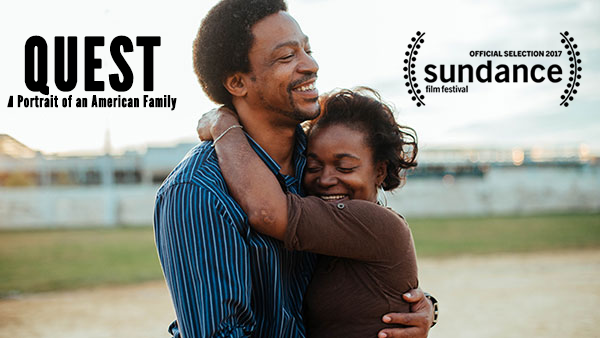
<style>
.page{position:relative;width:600px;height:338px}
.page>*{position:absolute;margin:0}
.t1{font:72px "LeagueGothic";letter-spacing:0.025em;color:#000000;font-weight:bold}
.t2{font:16px "LeagueGothic";letter-spacing:0.025em;color:#000000;font-weight:bold}
</style>
<div class="page">
<p class="t1" style="left:24px;top:35px;width:137px;height:61px">QUEST</p>
<p class="t2" style="left:7px;top:94px;width:170px;height:17px">A Portrait of an American Family</p>
</div>
